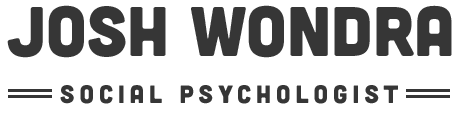
<style>
.page{position:relative;width:460px;height:114px;background:#ffffff}
.page>*{position:absolute;margin:0}
.t1{font:70px "Cubano-Regular";color:#363636}
.t2{font:25px "Cubano-Regular";letter-spacing:0.2em;color:#363636}
</style>
<div class="page">
<p class="t1" style="left:7px;top:5px;width:445px;height:53px">Josh wondra</p>
<p class="t2" style="left:60px;top:85px;width:338px;height:19px">social psychologist</p>
</div>
